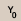
<style>
.page{position:relative;width:21px;height:21px;background:#d9cdc1}
.page>*{position:absolute;margin:0}
.t1{font:9px "Tahoma";color:#000000}
.t2{font:8px "Tahoma";color:#000000}
</style>
<div class="page">
<p class="t1" style="left:7px;top:6px;width:7px;height:7px">Y</p>
<p class="t2" style="left:12px;top:12px;width:5px;height:7px">0</p>
</div>
